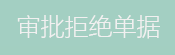
<style>
.page{position:relative;width:175px;height:55px;background:#a3cfc2}
.page>*{position:absolute;margin:0}
.t1{font:24px "MicrosoftYaHeiLight";color:#f1f0f0}
</style>
<div class="page">
<p class="t1" style="left:17px;top:15px;width:143px;height:24px">审批拒绝单据</p>
</div>
